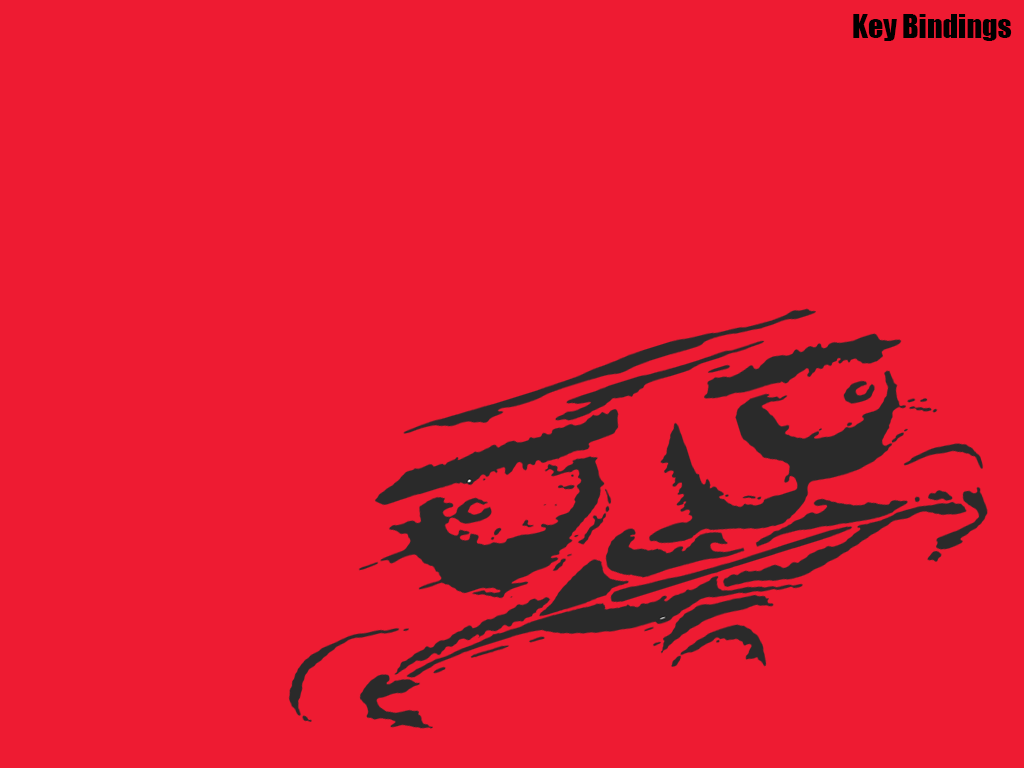
<style>
.page{position:relative;width:1024px;height:768px;background:#ee1b32}
.page>*{position:absolute;margin:0}
.t1{font:30px "Impact";color:#000000}
</style>
<div class="page">
<p class="t1" style="left:853px;top:14px;width:159px;height:27px">Key Bindings</p>
</div>
